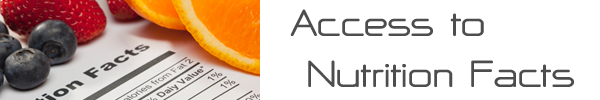
<style>
.page{position:relative;width:600px;height:100px;background:#ffffff}
.page>*{position:absolute;margin:0}
.t1{font:46.6px "NPNaipolAllinOne-Bold";letter-spacing:-0.025em;color:#4d4d4d}
</style>
<div class="page">
<p class="t1" style="left:290px;top:9px;width:284px;height:78px">Access to <br> Nutrition Facts</p>
</div>
